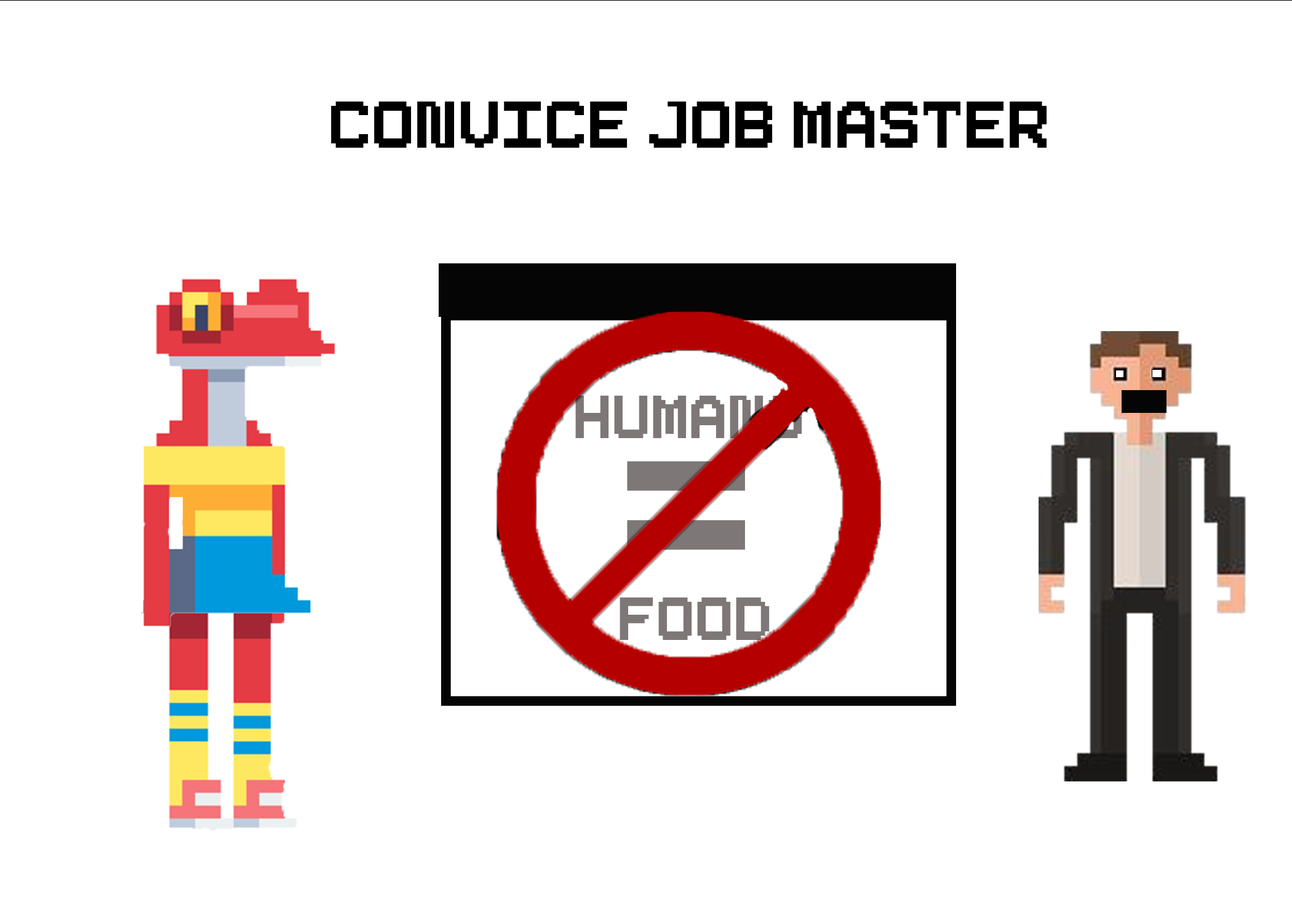
<style>
.page{position:relative;width:1292px;height:923px;background:#ffffff}
.page>*{position:absolute;margin:0}
.t1{font:92.3px "Pixeboy";color:#000000}
.t2{font:84.3px "Pixeboy";color:#7e7777}
.t3{font:294.8px "Pixeboy";color:#7e7777}
</style>
<div class="page">
<p class="t1" style="left:331px;top:102px;width:716px;height:46px">Convice Job Master</p>
<p class="t2" style="left:575px;top:396px;width:227px;height:42px">Humans</p>
<p class="t3" style="left:627px;top:461px;width:118px;height:89px">=</p>
<p class="t2" style="left:620px;top:597px;width:150px;height:43px">Food</p>
</div>
